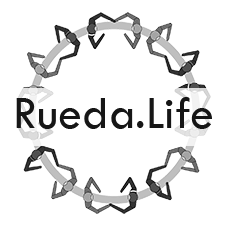
<style>
.page{position:relative;width:227px;height:227px;background:#ffffff}
.page>*{position:absolute;margin:0}
.t1{font:48px "TwCenMT-Regular";color:#161616}
</style>
<div class="page">
<p class="t1" style="left:16px;top:97px;width:196px;height:32px">Rueda.Life</p>
</div>
